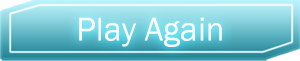
<style>
.page{position:relative;width:300px;height:61px}
.page>*{position:absolute;margin:0}
.t1{font:34.3px "FranklinGothic-Book";color:#fffefe}
</style>
<div class="page">
<p class="t1" style="left:79px;top:17px;width:143px;height:30px">Play Again</p>
</div>
